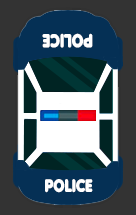
<style>
.page{position:relative;width:136px;height:215px;background:#333333}
.page>*{position:absolute;margin:0}
.t1{font:18.4px "Anja-Eliane-Nornal";letter-spacing:-0.005em;color:#ffffff;scale:0.8 1}
.t2{font:17.6px "Anja-Eliane-Nornal";letter-spacing:-0.005em;color:#ffffff;scale:0.8 1}
</style>
<div class="page">
<p class="t1" style="left:42px;top:33px;width:51px;height:15px;rotate:180deg">POLICE</p>
<p class="t2" style="left:45px;top:179px;width:48px;height:14px">POLICE</p>
</div>
